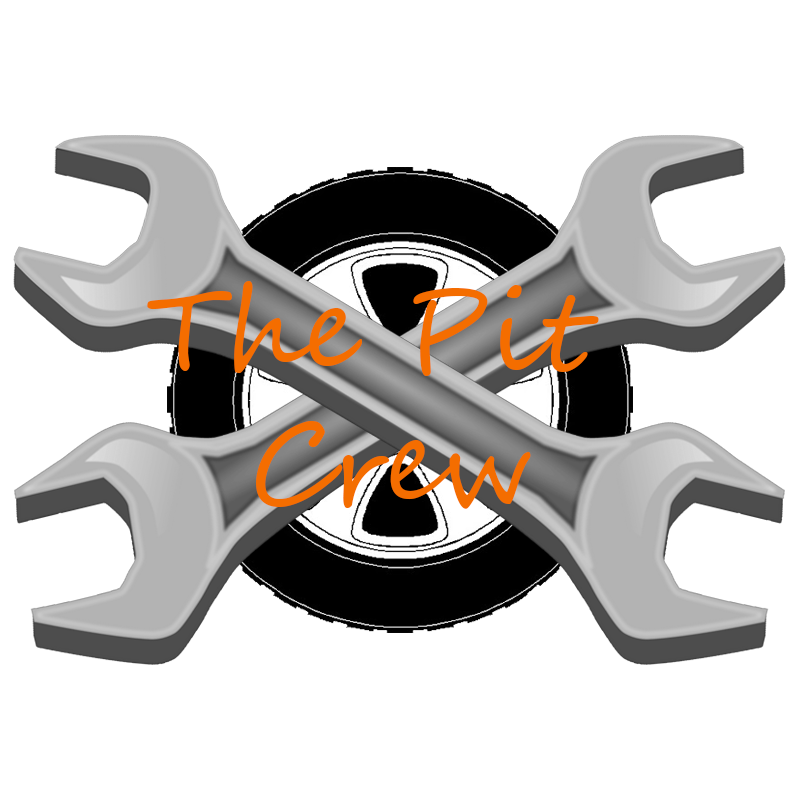
<style>
.page{position:relative;width:800px;height:800px;background:#ffffff}
.page>*{position:absolute;margin:0}
.t1{font:111.1px "SegoeScript";color:#f46d00}
</style>
<div class="page">
<p class="t1" style="left:147px;top:281px;width:452px;height:228px;text-align:center">The Pit <br>Crew</p>
</div>
